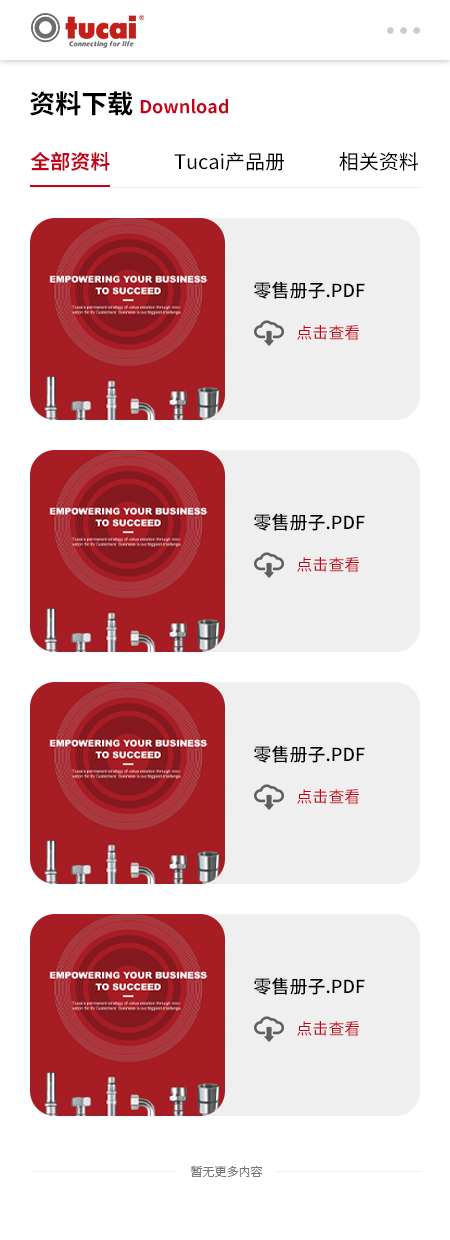
<style>
.page{position:relative;width:450px;height:1240px;background:#ffffff}
.page>*{position:absolute;margin:0}
.t1{font:18px "SourceHanSansCN-Bold";color:#c50018}
.t2{font:26px "SourceHanSansCN-Bold";color:#000000}
.t3{font:20px "SourceHanSansCN-Regular";color:#000000}
.t4{font:20px "SourceHanSansCN-Bold";color:#c50018}
.t5{font:18px "SourceHanSansCN-Medium";color:#000000}
.t6{font:16px "SourceHanSansCN-Regular";color:#c50018}
.t7{font:12px "SourceHanSansCN-Light";color:#767676}
</style>
<div class="page">
<p class="t1" style="left:30px;top:91px;width:198px;height:25px"><span class="t2">资料下载 </span>Download</p>
<p class="t3" style="left:30px;top:151px;width:388px;height:20px"><span class="t4">全部资料              </span>Tucai产品册            相关资料</p>
<p class="t5" style="left:254px;top:281px;width:111px;height:18px">零售册子.PDF</p>
<p class="t6" style="left:297px;top:325px;width:62px;height:15px">点击查看</p>
<p class="t5" style="left:254px;top:513px;width:111px;height:18px">零售册子.PDF</p>
<p class="t6" style="left:297px;top:557px;width:62px;height:15px">点击查看</p>
<p class="t5" style="left:254px;top:745px;width:111px;height:18px">零售册子.PDF</p>
<p class="t6" style="left:297px;top:789px;width:62px;height:15px">点击查看</p>
<p class="t5" style="left:254px;top:977px;width:111px;height:18px">零售册子.PDF</p>
<p class="t6" style="left:297px;top:1021px;width:62px;height:15px">点击查看</p>
<p class="t7" style="left:190px;top:1165px;width:73px;height:13px">暂无更多内容</p>
</div>
